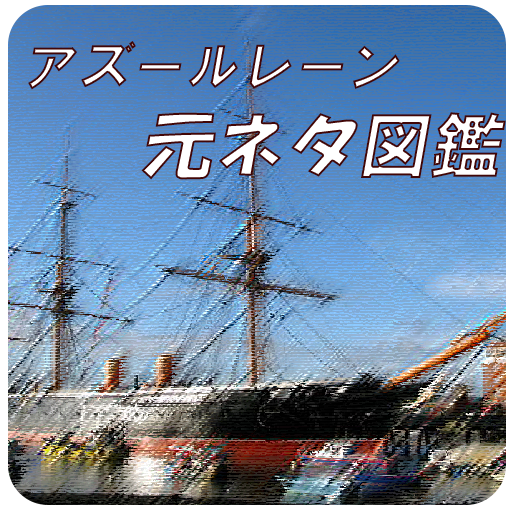
<style>
.page{position:relative;width:512px;height:512px}
.page>*{position:absolute;margin:0}
.t1{font:54px "HGSSoeiKakugothicUB";font-style:italic}
.t2{font:72px "HGSSoeiKakupoptai";font-style:italic}
.t3{font:72px "HGPSoeiKakugothicUB";font-style:italic}
</style>
<div class="page">
<p class="t1" style="left:28px;top:41px;width:372px;height:49px">アズールレーン</p>
<p class="t2" style="left:141px;top:112px;width:365px;height:68px">元ネタ<span class="t3">図鑑</span></p>
</div>
